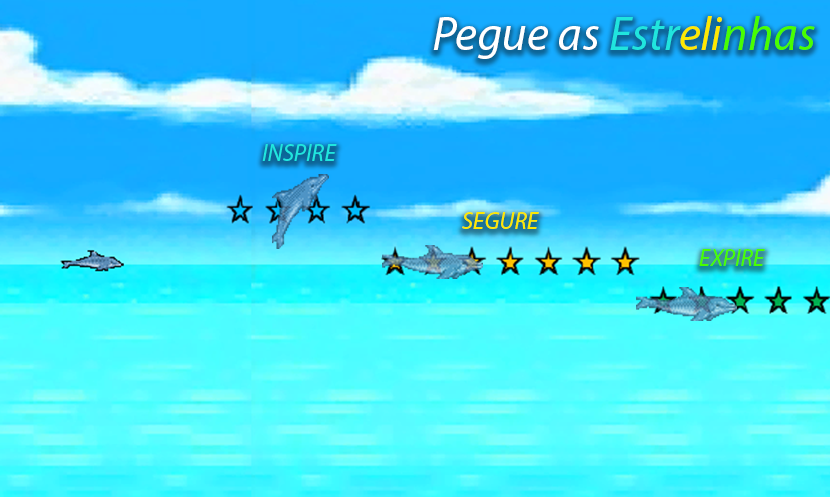
<style>
.page{position:relative;width:830px;height:497px}
.page>*{position:absolute;margin:0}
.t1{font:47.7px "MyriadPro-It";color:#ffffff}
.t2{font:47.7px "MyriadPro-It";color:#20e5de}
.t3{font:47.7px "MyriadPro-It";color:#fee900}
.t4{font:47.7px "MyriadPro-It";color:#48ff00}
.t5{font:24px "MyriadPro-It";color:#20e5de}
.t6{font:24px "MyriadPro-It";color:#fee900}
.t7{font:24px "MyriadPro-It";color:#48ff00}
</style>
<div class="page">
<p class="t1" style="left:433px;top:16px;width:382px;height:43px">Pegue as <span class="t2">Estr</span><span class="t3">eli</span><span class="t4">nhas</span></p>
<p class="t5" style="left:262px;top:144px;width:75px;height:17px">INSPIRE</p>
<p class="t6" style="left:462px;top:212px;width:77px;height:17px">SEGURE</p>
<p class="t7" style="left:699px;top:249px;width:66px;height:17px">EXPIRE</p>
</div>
